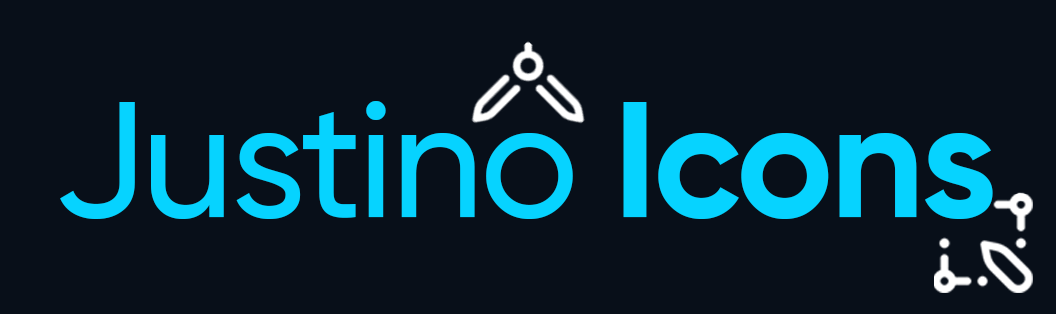
<style>
.page{position:relative;width:1056px;height:314px;background:#080f19}
.page>*{position:absolute;margin:0}
.t1{font:163.9px "Gilroy-Medium";letter-spacing:-0.02em;color:#06d3ff}
.t2{font:163.9px "Gilroy-Bold";letter-spacing:-0.02em;color:#06d3ff}
</style>
<div class="page">
<p class="t1" style="left:60px;top:101px;width:933px;height:118px">Justino<span class="t2"> Icons</span></p>
</div>
